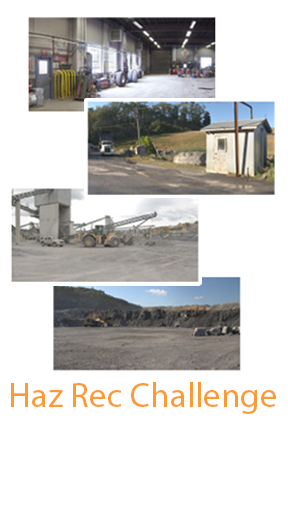
<style>
.page{position:relative;width:288px;height:522px;background:#ffffff}
.page>*{position:absolute;margin:0}
.t1{font:35px "MyriadPro-Regular";color:#ff9933}
</style>
<div class="page">
<p class="t1" style="left:11px;top:382px;width:265px;height:32px">Haz Rec Challenge</p>
</div>
